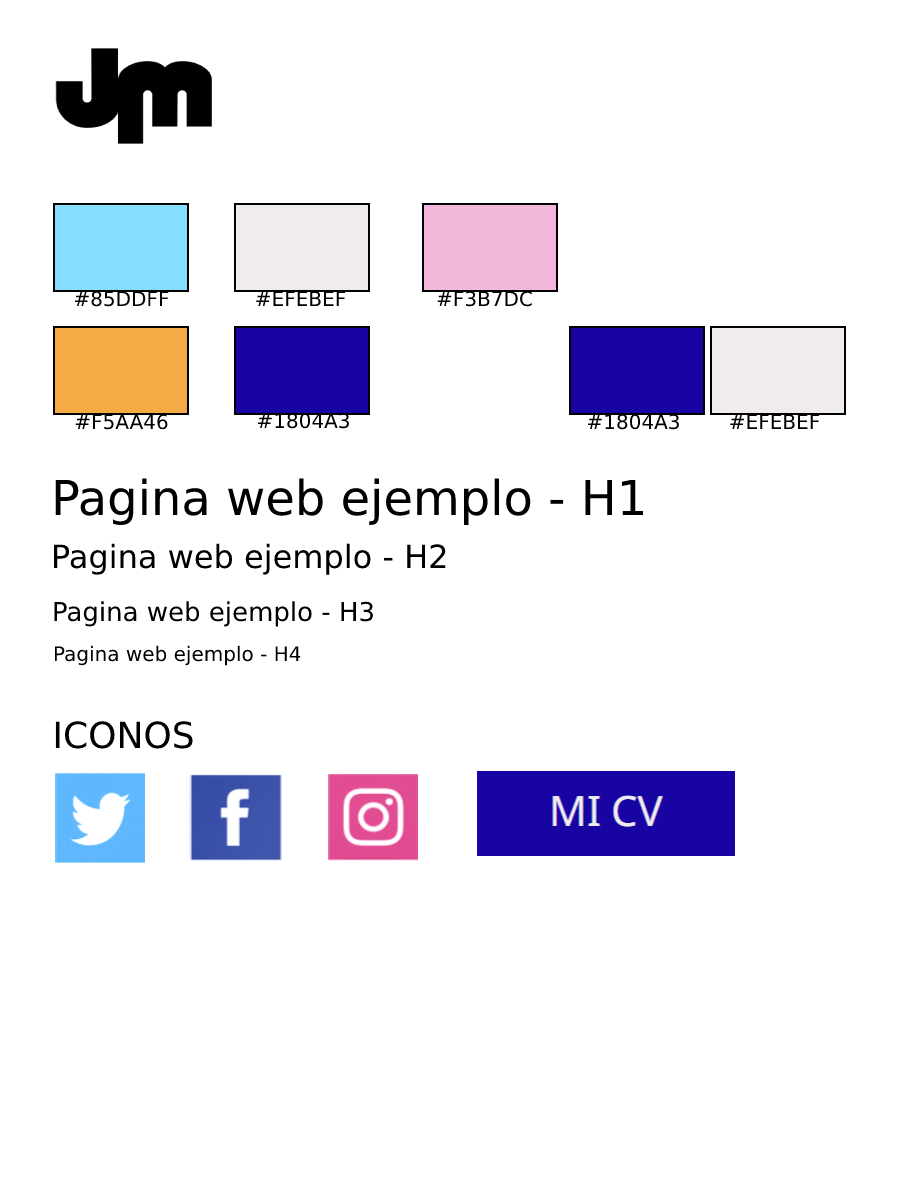
<style>
.page{position:relative;width:900px;height:1200px;background:#ffffff}
.page>*{position:absolute;margin:0}
.t1{font:20px "DejaVuSans";color:#000000}
.t2{font:48px "DejaVuSans";color:#000000}
.t3{font:32px "DejaVuSans";color:#000000}
.t4{font:26px "DejaVuSans";color:#000000}
.t5{font:36px "DejaVuSans";color:#000000}
</style>
<div class="page">
<p class="t1" style="left:74px;top:291px;width:95px;height:16px">#85DDFF</p>
<p class="t1" style="left:256px;top:291px;width:90px;height:15px">#EFEBEF</p>
<p class="t1" style="left:437px;top:291px;width:95px;height:16px">#F3B7DC</p>
<p class="t1" style="left:75px;top:414px;width:93px;height:16px">#F5AA46</p>
<p class="t1" style="left:258px;top:413px;width:91px;height:16px">#1804A3</p>
<p class="t1" style="left:588px;top:414px;width:91px;height:16px">#1804A3</p>
<p class="t1" style="left:730px;top:414px;width:90px;height:15px">#EFEBEF</p>
<p class="t2" style="left:55px;top:478px;width:588px;height:47px">Pagina web ejemplo - H1</p>
<p class="t3" style="left:54px;top:543px;width:392px;height:32px">Pagina web ejemplo - H2</p>
<p class="t4" style="left:54px;top:601px;width:319px;height:26px">Pagina web ejemplo - H3</p>
<p class="t1" style="left:54px;top:645px;width:247px;height:21px">Pagina web ejemplo - H4</p>
<p class="t5" style="left:55px;top:721px;width:138px;height:28px">ICONOS</p>
</div>
